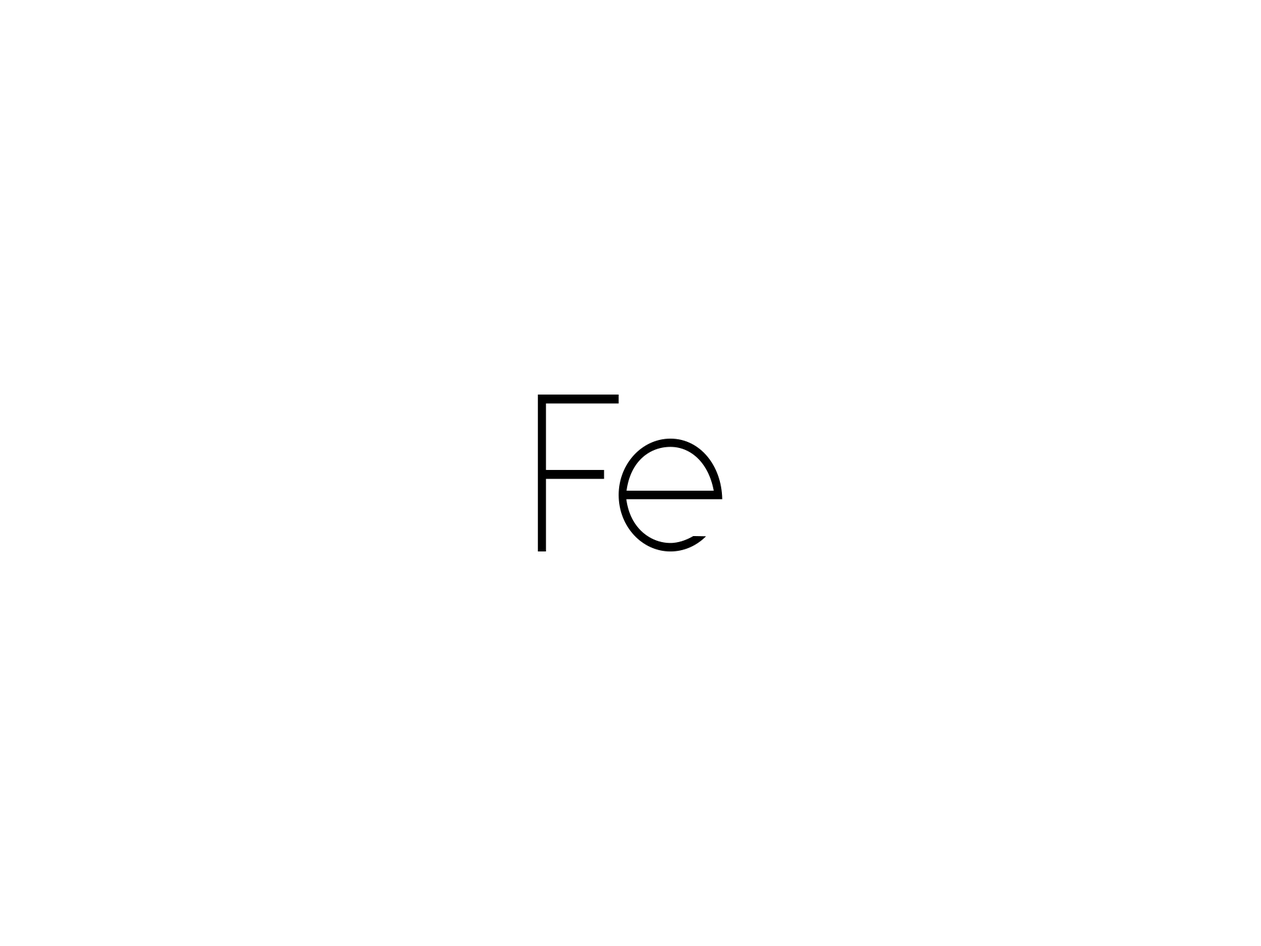
<style>
.page{position:relative;width:1261px;height:946px;background:#ffffff}
.page>*{position:absolute;margin:0}
.t1{font:222.4px "Alcubierre";color:#000000;scale:0.95 1}
</style>
<div class="page">
<p class="t1" style="left:538px;top:394px;width:185px;height:157px">Fe</p>
</div>
